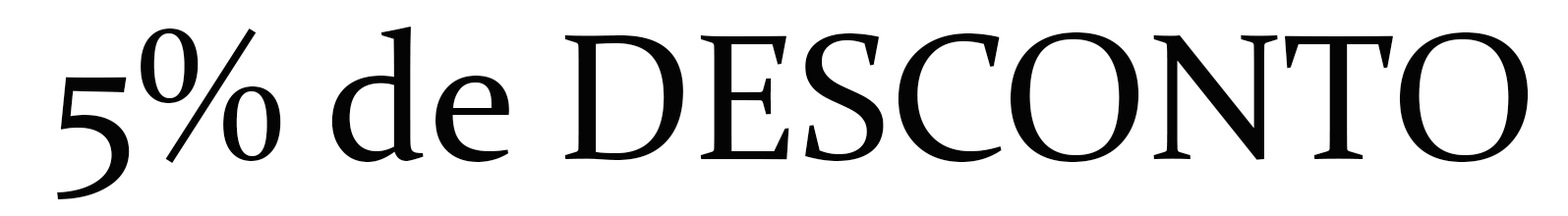
<style>
.page{position:relative;width:1568px;height:216px;background:#ffffff}
.page>*{position:absolute;margin:0}
.t1{font:181.1px "Constantia";color:#040404}
</style>
<div class="page">
<p class="t1" style="left:57px;top:27px;width:1472px;height:173px">5% de DESCONTO</p>
</div>
